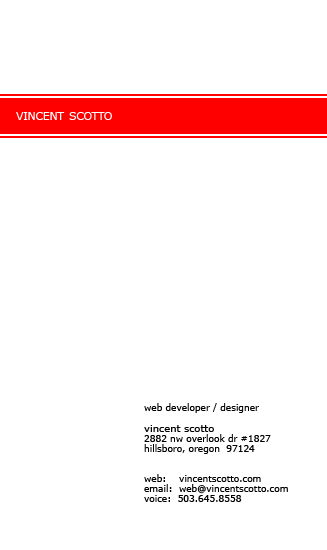
<style>
.page{position:relative;width:327px;height:550px;background:#ffffff}
.page>*{position:absolute;margin:0}
.t1{font:15px "Verdana";color:#ffffff;font-variant:small-caps}
.t2{font:9px "Verdana";color:#000000}
.t3{font:10px "Verdana";color:#000000}
</style>
<div class="page">
<p class="t1" style="left:16px;top:112px;width:96px;height:8px">vincent scotto</p>
<p class="t2" style="left:144px;top:403px;width:115px;height:10px">web developer / designer</p>
<p class="t3" style="left:144px;top:425px;width:70px;height:7px">vincent scotto</p>
<p class="t2" style="left:144px;top:434px;width:127px;height:8px">2882 nw overlook dr #1827</p>
<p class="t2" style="left:144px;top:444px;width:111px;height:10px">hillsboro, oregon  97124</p>
<p class="t2" style="left:144px;top:484px;width:144px;height:10px">email:  web@vincentscotto.com</p>
<p class="t2" style="left:144px;top:474px;width:117px;height:8px">web:    vincentscotto.com</p>
<p class="t2" style="left:144px;top:495px;width:98px;height:7px">voice:  503.645.8558</p>
</div>
